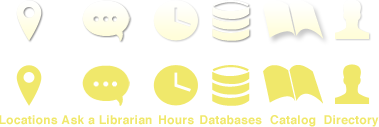
<style>
.page{position:relative;width:379px;height:127px;background:#ffffff}
.page>*{position:absolute;margin:0}
.t1{font:12px "Helvetica-Bold";letter-spacing:0.025em;color:#f0e86b}
</style>
<div class="page">
<p class="t1" style="left:0px;top:115px;width:58px;height:10px">Locations</p>
<p class="t1" style="left:61px;top:115px;width:91px;height:10px">Ask a Librarian</p>
<p class="t1" style="left:159px;top:115px;width:35px;height:10px">Hours</p>
<p class="t1" style="left:200px;top:115px;width:62px;height:10px">Databases</p>
<p class="t1" style="left:270px;top:115px;width:46px;height:12px">Catalog</p>
<p class="t1" style="left:324px;top:115px;width:55px;height:12px">Directory</p>
</div>
